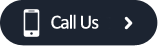
<style>
.page{position:relative;width:158px;height:46px;background:#1c2431}
.page>*{position:absolute;margin:0}
.t1{font:20px "Calibri";letter-spacing:-0.05em;color:#ffffff}
</style>
<div class="page">
<p class="t1" style="left:51px;top:14px;width:48px;height:15px">Call Us</p>
</div>
